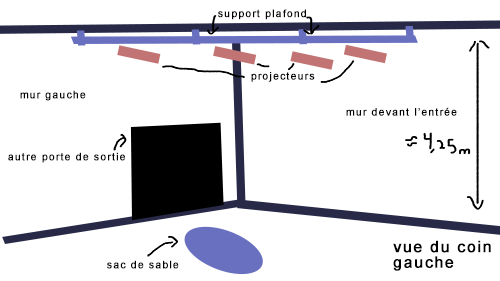
<style>
.page{position:relative;width:500px;height:281px;background:#ffffff}
.page>*{position:absolute;margin:0}
.t1{font:10.4px "ArialMT";letter-spacing:0.09em;color:#000000;font-weight:bold}
.t2{font:15.6px/15.6px "ArialMT";letter-spacing:0.09em;color:#000000;font-weight:bold}
</style>
<div class="page">
<p class="t1" style="left:218px;top:9px;width:88px;height:11px">support plafond</p>
<p class="t1" style="left:251px;top:72px;width:64px;height:10px">projecteurs</p>
<p class="t1" style="left:20px;top:90px;width:66px;height:11px">mur gauche</p>
<p class="t1" style="left:346px;top:107px;width:111px;height:9px">mur devant l’entrée</p>
<p class="t1" style="left:8px;top:152px;width:117px;height:11px">autre porte de sortie</p>
<p class="t2" style="left:393px;top:240px;width:98px;height:31px">vue du coin gauche</p>
<p class="t1" style="left:107px;top:260px;width:72px;height:9px">sac de sable</p>
</div>
